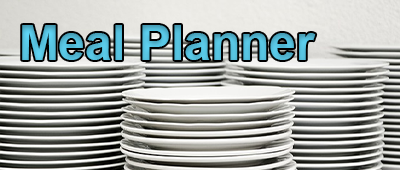
<style>
.page{position:relative;width:400px;height:170px}
.page>*{position:absolute;margin:0}
.t1{font:48px "Arial-BoldMT";color:#55bfdc}
</style>
<div class="page">
<p class="t1" style="left:22px;top:25px;width:294px;height:35px">Meal Planner</p>
</div>
